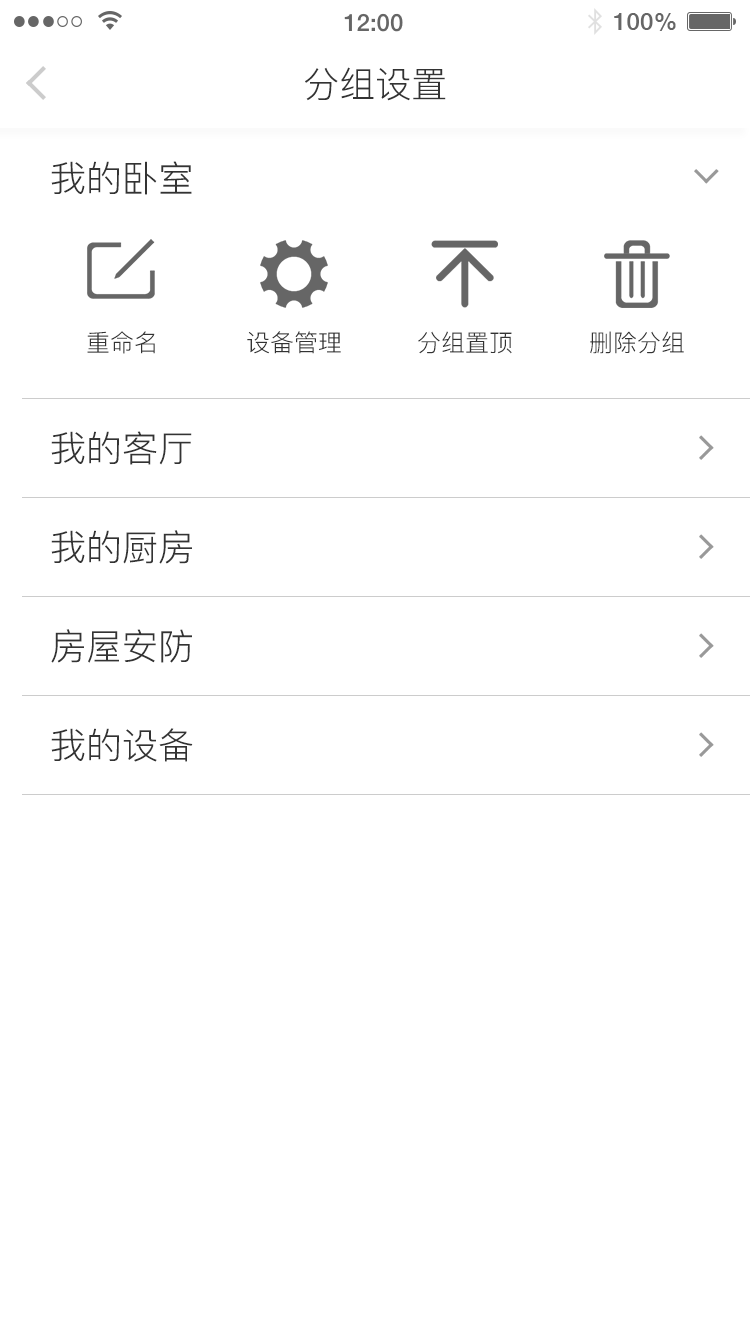
<style>
.page{position:relative;width:750px;height:1334px;background:#ffffff}
.page>*{position:absolute;margin:0}
.t1{font:36px "PingFang-SC-Regular";color:#333333}
.t2{font:24px "PingFang-SC-Regular";color:#333333}
</style>
<div class="page">
<p class="t1" style="left:305px;top:67px;width:141px;height:34px">分组设置</p>
<p class="t1" style="left:51px;top:161px;width:141px;height:34px">我的卧室</p>
<p class="t2" style="left:87px;top:331px;width:68px;height:23px">重命名</p>
<p class="t2" style="left:247px;top:331px;width:94px;height:23px">设备管理</p>
<p class="t2" style="left:418px;top:331px;width:94px;height:23px">分组置顶</p>
<p class="t2" style="left:590px;top:331px;width:94px;height:23px">删除分组</p>
<p class="t1" style="left:51px;top:431px;width:141px;height:34px">我的客厅</p>
<p class="t1" style="left:51px;top:530px;width:141px;height:34px">我的厨房</p>
<p class="t1" style="left:51px;top:629px;width:141px;height:34px">房屋安防</p>
<p class="t1" style="left:51px;top:728px;width:142px;height:34px">我的设备</p>
</div>
